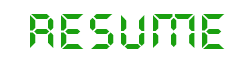
<style>
.page{position:relative;width:250px;height:64px;background:#ffffff}
.page>*{position:absolute;margin:0}
.t1{font:50px "QuartzMS";color:#1aa010}
</style>
<div class="page">
<p class="t1" style="left:30px;top:14px;width:195px;height:35px">Resume</p>
</div>
